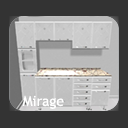
<style>
.page{position:relative;width:128px;height:128px;background:#333333}
.page>*{position:absolute;margin:0}
.t1{font:14px "TrebuchetMS";color:#ffffff}
</style>
<div class="page">
<p class="t1" style="left:22px;top:95px;width:42px;height:14px">Mirage</p>
</div>
